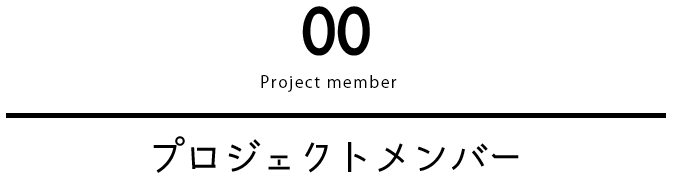
<style>
.page{position:relative;width:673px;height:176px;background:#ffffff}
.page>*{position:absolute;margin:0}
.t1{font:60px "HGPSoeiKakugothicUB";letter-spacing:-0.05em;color:#000000}
.t2{font:16px "04KanjyukuGothic";letter-spacing:0.1em;color:#000000}
.t3{font:42px "komorebi-gothic";letter-spacing:-0.1em;color:#000000}
</style>
<div class="page">
<p class="t1" style="left:302px;top:6px;width:68px;height:50px">00</p>
<p class="t2" style="left:261px;top:75px;width:136px;height:17px">Project member</p>
<p class="t3" style="left:153px;top:136px;width:366px;height:37px">プロジェクトメンバー</p>
</div>
